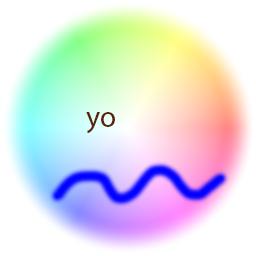
<style>
.page{position:relative;width:256px;height:256px;background:#ffffff}
.page>*{position:absolute;margin:0}
.t1{font:30px "MyriadPro-Regular";color:#582308}
</style>
<div class="page">
<p class="t1" style="left:86px;top:112px;width:29px;height:22px">yo</p>
</div>
